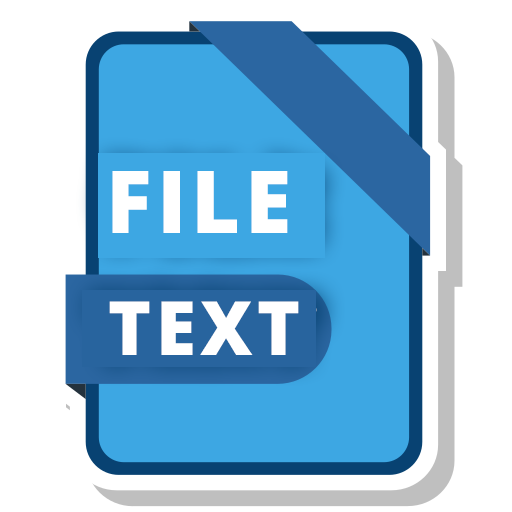
<style>
.page{position:relative;width:512px;height:512px;background:#ffffff}
.page>*{position:absolute;margin:0}
.t1{font:87px "OpenSans-Extrabold";letter-spacing:0.06em;color:#ffffff;scale:0.97 1}
.t2{font:75px "OpenSans-Extrabold";letter-spacing:0.06em;color:#ffffff;scale:0.97 1}
</style>
<div class="page">
<p class="t1" style="left:112px;top:171px;width:176px;height:62px">FILE</p>
<p class="t2" style="left:109px;top:301px;width:190px;height:54px">TEXT</p>
</div>
